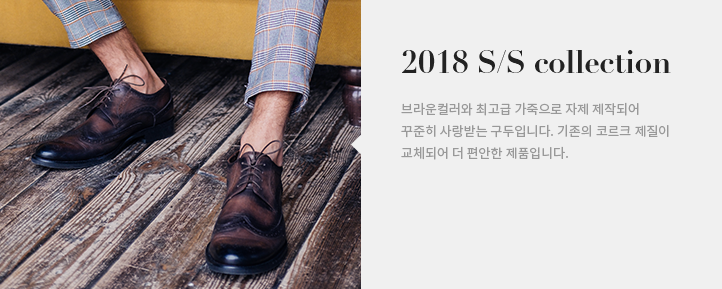
<style>
.page{position:relative;width:722px;height:289px;background:#f0f0f0}
.page>*{position:absolute;margin:0}
.t1{font:31px "DidotLH-Bold";letter-spacing:-0.01em;color:#222222}
.t2{font:13px/22px "NotoSansCJKkr-Regular";color:#999999}
</style>
<div class="page">
<p class="t1" style="left:402px;top:50px;width:269px;height:23px">2018 S/S collection</p>
<p class="t2" style="left:401px;top:102px;width:268px;height:58px">브라운컬러와 최고급 가죽으로 자제 제작되어 <br>꾸준히 사랑받는 구두입니다. 기존의 코르크 제질이<br>교체되어 더 편안한 제품입니다.</p>
</div>
